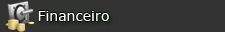
<style>
.page{position:relative;width:225px;height:32px;background:#333333}
.page>*{position:absolute;margin:0}
.t1{font:14px "Verdana";color:#ffffff}
</style>
<div class="page">
<p class="t1" style="left:38px;top:11px;width:71px;height:10px">Financeiro</p>
</div>
